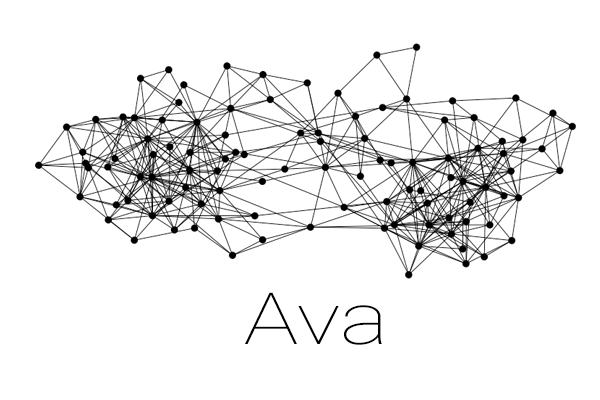
<style>
.page{position:relative;width:600px;height:400px;background:#ffffff}
.page>*{position:absolute;margin:0}
.t1{font:72px "Roboto-Thin";color:#000000;scale:1.28 1}
</style>
<div class="page">
<p class="t1" style="left:245px;top:292px;width:137px;height:53px">Ava</p>
</div>
